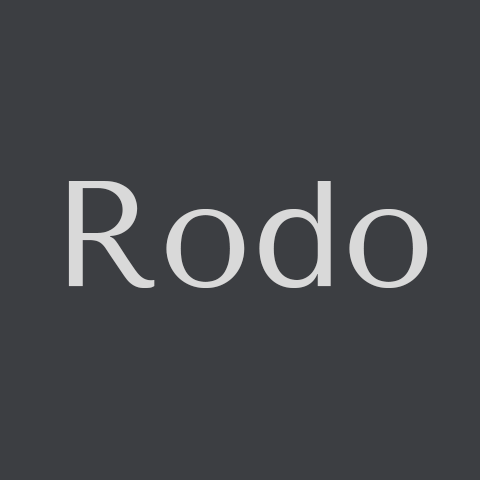
<style>
.page{position:relative;width:480px;height:480px;background:#3c3e42}
.page>*{position:absolute;margin:0}
.t1{font:150px "TenorSans";color:#d9d9d9}
</style>
<div class="page">
<p class="t1" style="left:68px;top:181px;width:360px;height:107px">Rodo</p>
</div>
